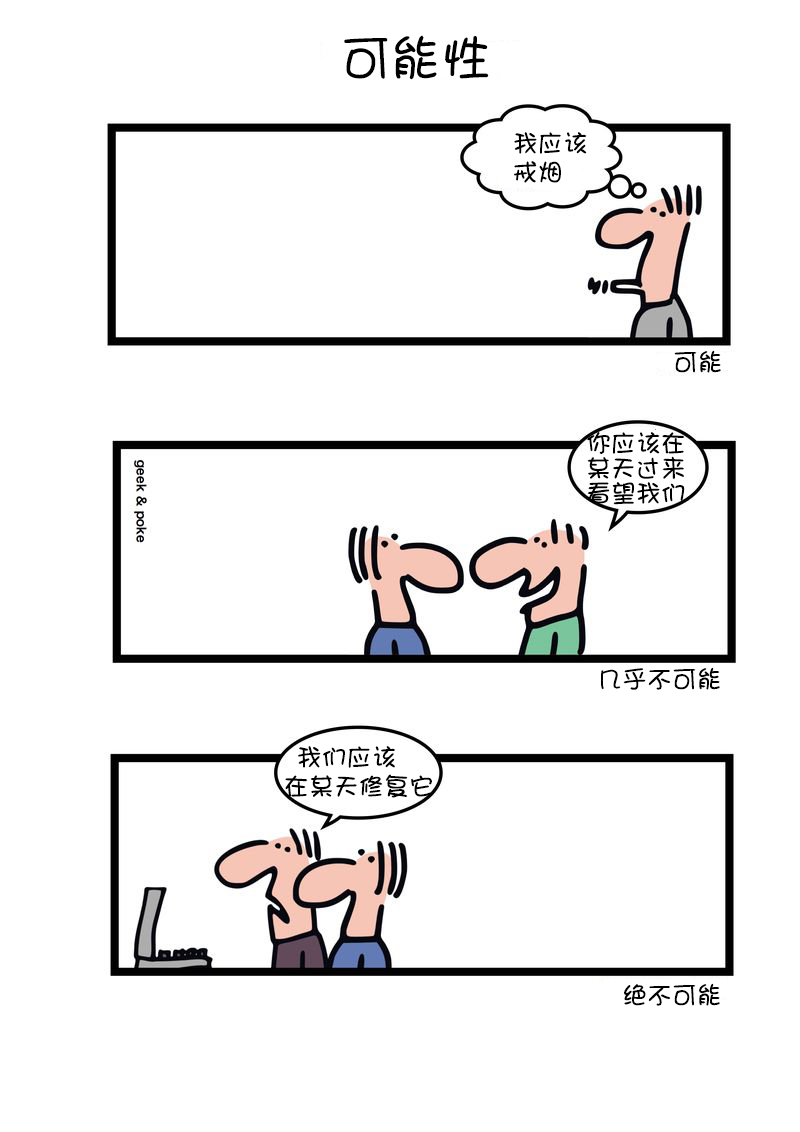
<style>
.page{position:relative;width:800px;height:1132px;background:#ffffff}
.page>*{position:absolute;margin:0}
.t1{font:50px "DFShaoNvW5";color:#000000}
.t2{font:25px/29.2px "DFShaoNvW5";color:#000000}
.t3{font:25px "DFShaoNvW5";color:#000000}
.t4{font:25px/25px "DFShaoNvW5";color:#000000}
</style>
<div class="page">
<p class="t1" style="left:344px;top:35px;width:145px;height:45px">可能性</p>
<p class="t2" style="left:514px;top:132px;width:73px;height:51px">我应该<br>戒烟</p>
<p class="t3" style="left:674px;top:350px;width:47px;height:23px">可能</p>
<p class="t4" style="left:587px;top:432px;width:98px;height:73px">你应该在<br>某天过来<br>看望我们</p>
<p class="t3" style="left:601px;top:667px;width:119px;height:23px">几乎不可能</p>
<p class="t2" style="left:285px;top:746px;width:147px;height:52px">我们应该<br>在某天修复它</p>
<p class="t3" style="left:624px;top:983px;width:96px;height:23px">绝不可能</p>
</div>
